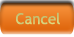
<style>
.page{position:relative;width:74px;height:37px}
.page>*{position:absolute;margin:0}
.t1{font:15px "TrebuchetMS";color:#ccc978}
</style>
<div class="page">
<p class="t1" style="left:16px;top:12px;width:44px;height:13px">Cancel</p>
</div>
